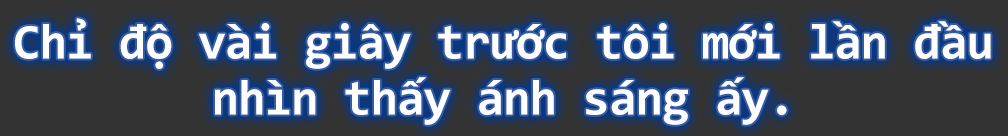
<style>
.page{position:relative;width:1008px;height:136px;background:#333333}
.page>*{position:absolute;margin:0}
.t1{font:50px/48px "Consolas-Bold";letter-spacing:-0.02em;color:#fefefe}
</style>
<div class="page">
<p class="t1" style="left:15px;top:18px;width:976px;height:107px;text-align:center">Chỉ độ vài giây trước tôi mới lần đầu<br>nhìn thấy ánh sáng ấy.</p>
</div>
